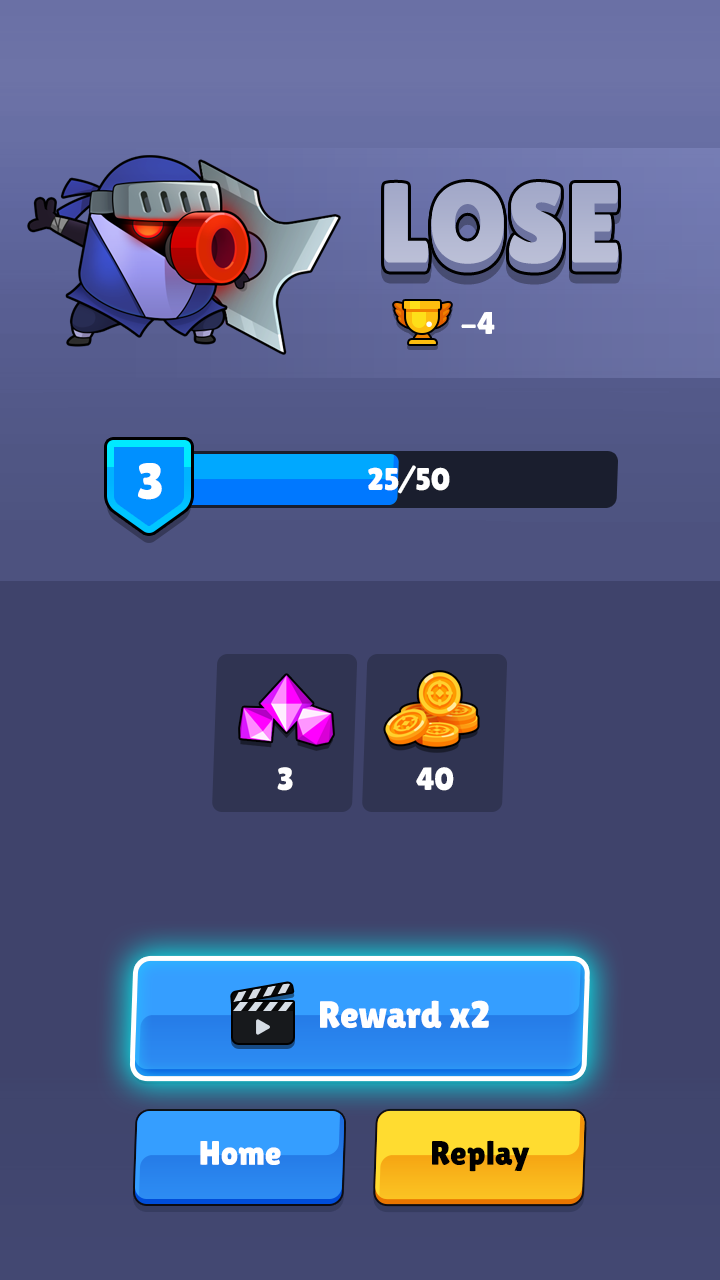
<style>
.page{position:relative;width:720px;height:1280px;background:#3f436b}
.page>*{position:absolute;margin:0}
.t1{font:113.1px "LilitaOne";color:#aeb4cf}
.t2{font:113.1px "LilitaOne";color:#afb4d0}
.t3{font:113.1px "LilitaOne";color:#a2a8c8}
.t4{font:113.1px "LilitaOne";color:#acb1ce}
.t5{font:113.1px "LilitaOne";color:#adb2ce}
.t6{font:113.1px "LilitaOne";color:#adb3cf}
.t7{font:113.1px "LilitaOne";color:#aeb3cf}
.t8{font:31.2px "LilitaOne";color:#ffffff}
.t9{font:50.6px "LilitaOne";color:#ffffff}
.t10{font:31.2px "LilitaOne";color:#ffffff;text-transform:uppercase}
.t11{font:32px "LilitaOne";color:#ffffff;text-transform:uppercase}
.t12{font:38px "LilitaOne";color:#ffffff}
.t13{font:34px "LilitaOne";color:#ffffff}
.t14{font:34px "LilitaOne";color:#000000}
</style>
<div class="page">
<p class="t1" style="left:384px;top:185px;width:235px;height:82px">LOSE</p>
<p class="t2" style="left:384px;top:184px;width:235px;height:82px">LOSE</p>
<p class="t2" style="left:384px;top:183px;width:235px;height:82px">LOSE</p>
<p class="t3" style="left:384px;top:182px;width:235px;height:82px">LOSE</p>
<p class="t4" style="left:384px;top:190px;width:235px;height:83px">LOSE</p>
<p class="t5" style="left:384px;top:189px;width:235px;height:83px">LOSE</p>
<p class="t5" style="left:384px;top:188px;width:235px;height:83px">LOSE</p>
<p class="t6" style="left:384px;top:187px;width:235px;height:83px">LOSE</p>
<p class="t7" style="left:384px;top:186px;width:235px;height:83px">LOSE</p>
<p class="t8" style="left:461px;top:312px;width:34px;height:22px">-4</p>
<p class="t9" style="left:138px;top:463px;width:24px;height:37px">3</p>
<p class="t10" style="left:368px;top:465px;width:82px;height:29px">25/50</p>
<p class="t11" style="left:277px;top:767px;width:16px;height:24px">3</p>
<p class="t11" style="left:416px;top:767px;width:38px;height:24px">40</p>
<p class="t12" style="left:320px;top:1000px;width:169px;height:29px">Reward x2</p>
<p class="t13" style="left:200px;top:1141px;width:81px;height:24px">Home</p>
<p class="t14" style="left:432px;top:1140px;width:98px;height:32px">Replay</p>
</div>
